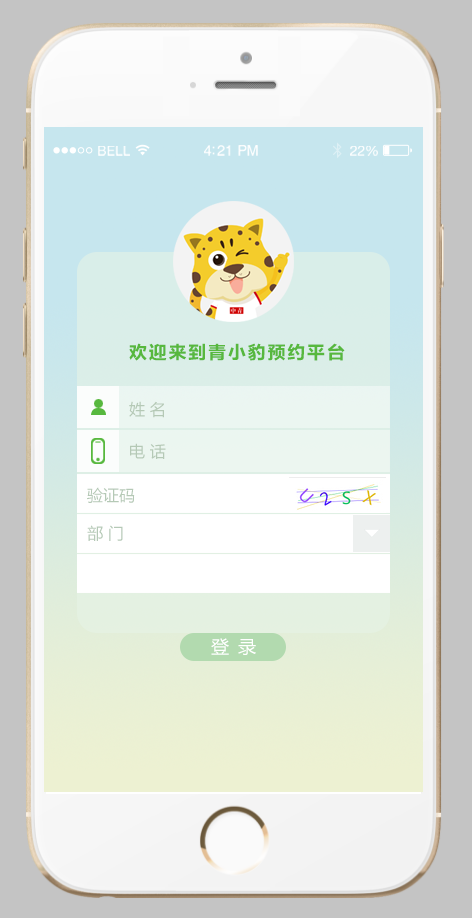
<style>
.page{position:relative;width:472px;height:918px}
.page>*{position:absolute;margin:0}
.t1{font:13.4px "HelveticaNeue";letter-spacing:0.02em;color:#ffffff}
.t2{font:14.5px "Helvetica";letter-spacing:-0.02em;color:#ffffff}
.t3{font:13.9px "HelveticaNeue";letter-spacing:-0.02em;color:#ffffff}
.t4{font:18px "FZLTDHK--GBK1-0";letter-spacing:0.1em;color:#57b83e}
.t5{font:16px/42px "MicrosoftYaHei";color:#b5c9b6}
.t6{font:16px "MicrosoftYaHei";color:#b5c9b6}
.t7{font:18px "MicrosoftYaHei";letter-spacing:0.1em;color:#ffffff}
</style>
<div class="page">
<p class="t1" style="left:98px;top:146px;width:32px;height:10px">BELL</p>
<p class="t2" style="left:204px;top:145px;width:54px;height:11px">4:21 PM</p>
<p class="t3" style="left:350px;top:146px;width:28px;height:10px">22%</p>
<p class="t4" style="left:129px;top:343px;width:216px;height:18px">欢迎来到青小豹预约平台</p>
<p class="t5" style="left:129px;top:401px;width:37px;height:58px">姓 名<br>电 话</p>
<p class="t6" style="left:87px;top:487px;width:48px;height:16px">验证码</p>
<p class="t6" style="left:87px;top:525px;width:36px;height:16px">部 门</p>
<p class="t7" style="left:211px;top:638px;width:45px;height:17px">登 录</p>
</div>
